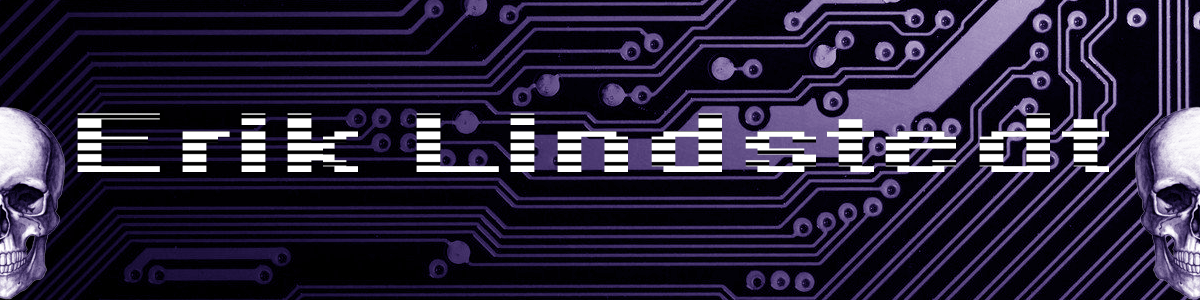
<style>
.page{position:relative;width:1200px;height:300px}
.page>*{position:absolute;margin:0}
.t1{font:75px "System";color:#fffeff;scale:2 1}
</style>
<div class="page">
<p class="t1" style="left:77px;top:113px;width:1032px;height:59px">Erik Lindstedt</p>
</div>
